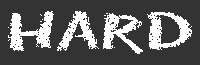
<style>
.page{position:relative;width:200px;height:65px;background:#333333}
.page>*{position:absolute;margin:0}
.t1{font:49.8px "Eraser-Regular";color:#ffffff;scale:1.46 1}
</style>
<div class="page">
<p class="t1" style="left:8px;top:11px;width:184px;height:43px">hard</p>
</div>
